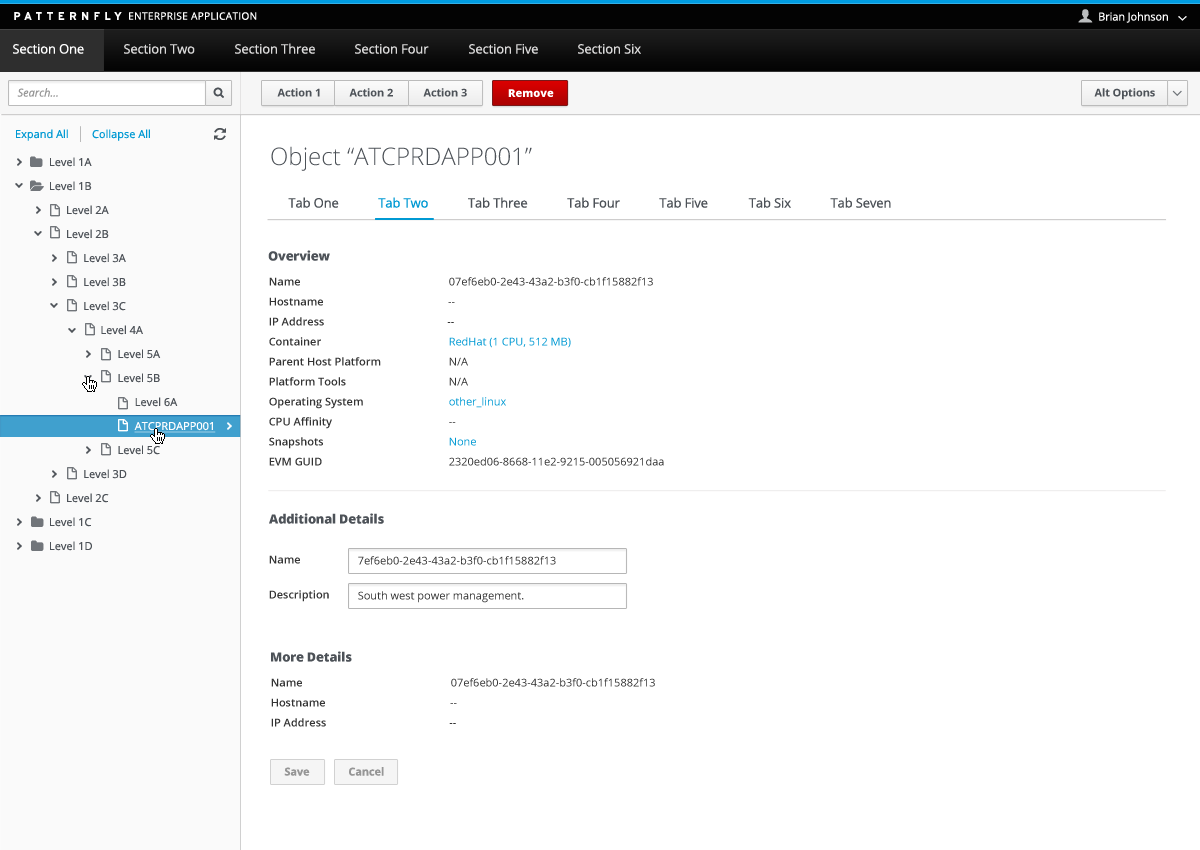
<style>
.page{position:relative;width:1200px;height:850px;background:#ffffff}
.page>*{position:absolute;margin:0}
.t1{font:10.2px "OpenSans";letter-spacing:0.025em;color:#ffffff}
.t2{font:11px "OpenSans";letter-spacing:-0.01em;color:#ffffff}
.t3{font:13px "OpenSans";letter-spacing:-0.01em;color:#ffffff}
.t4{font:13px "OpenSans";letter-spacing:-0.01em;color:#dbdada}
.t5{font:11px "OpenSans-Italic";color:#969696}
.t6{font:11px "OpenSans-Bold";letter-spacing:-0.01em;color:#4d5258}
.t7{font:11px "OpenSans-Extrabold";color:#ffffff}
.t8{font:11px "OpenSans";color:#0099d3}
.t9{font:24px "OpenSans-Light";color:#4d5258}
.t10{font:11px/24px "OpenSans";color:#4d5258}
.t11{font:11px/24px "OpenSans";color:#fefeff;text-decoration:underline}
.t12{font:13px "OpenSans";letter-spacing:-0.01em;color:#4d5258}
.t13{font:13px "OpenSans";letter-spacing:-0.01em;color:#0099d3}
.t14{font:12.7px "OpenSans-Extrabold";letter-spacing:-0.01em;color:#4d5258}
.t15{font:11px/20px "OpenSans-Semibold";color:#333333}
.t16{font:11px/20px "OpenSans";color:#333333}
.t17{font:11px/20px "OpenSans";color:#0099d3}
.t18{font:11px "OpenSans-Semibold";color:#333333}
.t19{font:11px "OpenSans";color:#333333}
.t20{font:11px "OpenSans-Bold";letter-spacing:-0.01em;color:#969696}
</style>
<div class="page">
<p class="t1" style="left:129px;top:12px;width:128px;height:8px">ENTERPRISE APPLICATION</p>
<p class="t2" style="left:1099px;top:12px;width:69px;height:11px">Brian Johnson</p>
<p class="t3" style="left:13px;top:44px;width:71px;height:10px">Section One</p>
<p class="t4" style="left:124px;top:44px;width:71px;height:10px">Section Two</p>
<p class="t4" style="left:235px;top:43px;width:80px;height:11px">Section Three</p>
<p class="t4" style="left:355px;top:44px;width:74px;height:10px">Section Four</p>
<p class="t4" style="left:469px;top:44px;width:69px;height:10px">Section Five</p>
<p class="t4" style="left:578px;top:44px;width:63px;height:10px">Section Six</p>
<p class="t5" style="left:17px;top:88px;width:41px;height:9px">Search...</p>
<p class="t6" style="left:277px;top:88px;width:43px;height:9px">Action 1</p>
<p class="t6" style="left:349px;top:88px;width:44px;height:9px">Action 2</p>
<p class="t6" style="left:423px;top:88px;width:44px;height:9px">Action 3</p>
<p class="t7" style="left:508px;top:89px;width:46px;height:8px">Remove</p>
<p class="t6" style="left:1094px;top:88px;width:61px;height:12px">Alt Options</p>
<p class="t8" style="left:16px;top:129px;width:52px;height:12px">Expand All</p>
<p class="t8" style="left:92px;top:129px;width:58px;height:12px">Collapse All</p>
<p class="t9" style="left:271px;top:146px;width:261px;height:25px">Object “ATCPRDAPP001”</p>
<p class="t10" style="left:50px;top:157px;width:166px;height:394px">Level 1A<br>Level 1B<br>      Level 2A<br>      Level 2B<br>            Level 3A<br>            Level 3B<br>            Level 3C<br>                  Level 4A<br>                        Level 5A<br>                        Level 5B<br>                              Level 6A<br>                              <span class="t11">ATCPRDAPP001<br>                        </span>Level 5C<br>            Level 3D<br>      Level 2C<br>Level 1C<br>Level 1D</p>
<p class="t12" style="left:288px;top:197px;width:603px;height:11px">Tab One             <span class="t13">Tab Two            </span>Tab Three            Tab Four            Tab Five             Tab Six            Tab Seven</p>
<p class="t14" style="left:268px;top:250px;width:62px;height:11px">Overview</p>
<p class="t15" style="left:269px;top:277px;width:395px;height:189px">Name <span class="t16">    07ef6eb0-2e43-43a2-b3f0-cb1f15882f13<br></span>Hostname<span class="t16">                           --<br></span>IP Address                                           --<br>Container    <span class="t17">RedHat (1 CPU, 512 MB)<br></span>Parent Host Platform<span class="t16">  N/A<br></span>Platform Tools<span class="t16">   N/A<br></span>Operating System   <span class="t17">other_linux<br></span>CPU Affinity<span class="t16">    --<br></span>Snapshots    <span class="t17">None<br></span>EVM GUID<span class="t16">    2320ed06-8668-11e2-9215-005056921daa</span></p>
<p class="t14" style="left:269px;top:513px;width:115px;height:11px">Additional Details</p>
<p class="t18" style="left:269px;top:555px;width:31px;height:9px">Name</p>
<p class="t19" style="left:358px;top:556px;width:198px;height:9px">7ef6eb0-2e43-43a2-b3f0-cb1f15882f13</p>
<p class="t18" style="left:269px;top:590px;width:60px;height:12px">Description</p>
<p class="t19" style="left:358px;top:591px;width:166px;height:12px">South west power management.</p>
<p class="t14" style="left:271px;top:651px;width:81px;height:11px">More Details</p>
<p class="t15" style="left:271px;top:678px;width:384px;height:49px">Name <span class="t16">    07ef6eb0-2e43-43a2-b3f0-cb1f15882f13<br></span>Hostname<span class="t16">                           --<br></span>IP Address                                           --</p>
<p class="t20" style="left:284px;top:767px;width:26px;height:9px">Save</p>
<p class="t20" style="left:349px;top:767px;width:35px;height:9px">Cancel</p>
</div>
